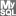
<style>
.page{position:relative;width:16px;height:16px;background:#ffffff}
.page>*{position:absolute;margin:0}
.t1{font:11.3px "Arial-BoldMT";letter-spacing:-0.01em;color:#ffffff;scale:1.18 1}
.t2{font:8px "Arial-BoldMT";letter-spacing:-0.01em;color:#ffffff}
</style>
<div class="page">
<p class="t1" style="left:0px;top:0px;width:11px;height:9px">M</p>
<p class="t2" style="left:10px;top:2px;width:5px;height:7px">y</p>
<p class="t2" style="left:0px;top:9px;width:17px;height:7px">SQL</p>
</div>
